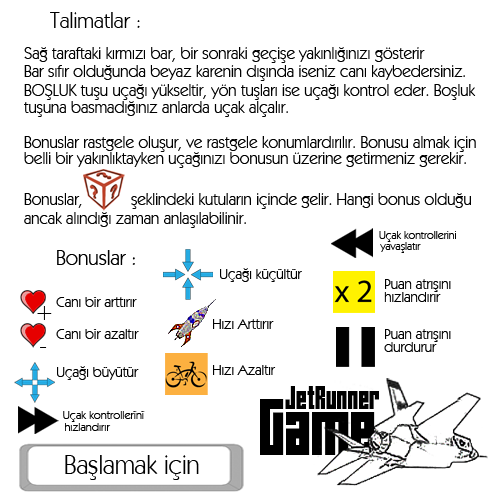
<style>
.page{position:relative;width:500px;height:500px;background:#ffffff}
.page>*{position:absolute;margin:0}
.t1{font:22.3px "00370";color:#000000}
.t2{font:16.6px "00370";color:#000000}
.t3{font:11.5px "00370";color:#000000}
.t4{font:21px "00370";color:#000000}
.t5{font:14.8px "00370";color:#000000}
.t6{font:23.2px "00370";color:#000000}
.t7{font:27.1px "AngiesNewHouse";color:#000000}
.t8{font:65.6px "AngiesNewHouse";color:#000000}
.t9{font:12px "00370";color:#000000}
.t10{font:26.6px "00370";color:#000000}
</style>
<div class="page">
<p class="t1" style="left:50px;top:12px;width:90px;height:16px">Talimatlar :</p>
<p class="t2" style="left:24px;top:47px;width:401px;height:16px">Sağ taraftaki kırmızı bar, bir sonraki geçişe yakınlığınızı gösterir</p>
<p class="t2" style="left:24px;top:65px;width:441px;height:16px">Bar sıfır olduğunda beyaz karenin dışında iseniz canı kaybedersiniz.</p>
<p class="t2" style="left:24px;top:84px;width:452px;height:16px">BOŞLUK tuşu uçağı yükseltir, yön tuşları ise uçağı kontrol eder. Boşluk</p>
<p class="t2" style="left:24px;top:101px;width:264px;height:16px">tuşuna basmadığınız anlarda uçak alçalır.</p>
<p class="t2" style="left:24px;top:136px;width:452px;height:16px">Bonuslar rastgele oluşur, ve rastgele konumlardırılır. Bonusu almak için</p>
<p class="t2" style="left:24px;top:152px;width:442px;height:16px">belli bir yakınlıktayken uçağınızı bonusun üzerine getirmeniz gerekir.</p>
<p class="t2" style="left:24px;top:193px;width:58px;height:15px">Bonuslar,</p>
<p class="t2" style="left:131px;top:193px;width:340px;height:16px">şeklindeki kutuların içinde gelir. Hangi bonus olduğu</p>
<p class="t2" style="left:24px;top:212px;width:222px;height:16px">ancak alındığı zaman anlaşılabilinir.</p>
<p class="t3" style="left:379px;top:231px;width:77px;height:11px">Uçak kontrollerini</p>
<p class="t3" style="left:380px;top:242px;width:41px;height:11px">yavaşlatır</p>
<p class="t4" style="left:57px;top:250px;width:78px;height:15px">Bonuslar :</p>
<p class="t5" style="left:220px;top:268px;width:82px;height:14px">Uçağı küçültür</p>
<p class="t5" style="left:385px;top:279px;width:66px;height:13px">Puan atrışını</p>
<p class="t5" style="left:384px;top:292px;width:57px;height:10px">hızlandırır</p>
<p class="t5" style="left:56px;top:297px;width:81px;height:10px">Canı bir arttırır</p>
<p class="t6" style="left:37px;top:306px;width:15px;height:14px">+</p>
<p class="t5" style="left:56px;top:329px;width:83px;height:10px">Canı bir azaltır</p>
<p class="t5" style="left:213px;top:319px;width:61px;height:10px">Hızı Arttırır</p>
<p class="t5" style="left:385px;top:329px;width:66px;height:13px">Puan atrışını</p>
<p class="t5" style="left:384px;top:342px;width:53px;height:10px">durdurur</p>
<p class="t6" style="left:40px;top:347px;width:7px;height:1px">-</p>
<p class="t5" style="left:57px;top:366px;width:82px;height:14px">Uçağı büyütür</p>
<p class="t5" style="left:213px;top:365px;width:63px;height:10px">Hızı Azaltır</p>
<p class="t7" style="left:285px;top:386px;width:94px;height:23px">JetRunner</p>
<p class="t8" style="left:260px;top:399px;width:115px;height:56px">Game</p>
<p class="t9" style="left:63px;top:411px;width:82px;height:11px">Uçak kontrollerini</p>
<p class="t9" style="left:65px;top:423px;width:46px;height:8px">hızlandırır</p>
<p class="t10" style="left:65px;top:455px;width:134px;height:25px">Başlamak için</p>
</div>
